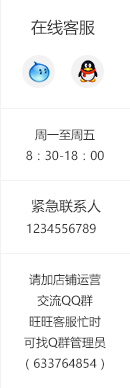
<style>
.page{position:relative;width:130px;height:388px;background:#ffffff}
.page>*{position:absolute;margin:0}
.t1{font:16px "MicrosoftYaHei";color:#333333}
.t2{font:12px "MicrosoftYaHei";color:#333333}
.t3{font:14px "MicrosoftYaHei";color:#333333}
</style>
<div class="page">
<p class="t1" style="left:31px;top:19px;width:64px;height:16px">在线客服</p>
<p class="t2" style="left:26px;top:129px;width:78px;height:32px;text-align:center">周一至周五<br>8：30-18：00</p>
<p class="t3" style="left:31px;top:199px;width:70px;height:14px">紧急联系人</p>
<p class="t2" style="left:27px;top:223px;width:69px;height:11px">1234556789</p>
<p class="t2" style="left:24px;top:273px;width:82px;height:97px;text-align:center">请加店铺运营<br>交流QQ群<br>旺旺客服忙时<br>可找Q群管理员<br>（633764854）</p>
</div>
